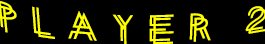
<style>
.page{position:relative;width:265px;height:44px;background:#000000}
.page>*{position:absolute;margin:0}
.t1{font:53.3px "entanglement";color:#ffff00}
</style>
<div class="page">
<p class="t1" style="left:0px;top:0px;width:267px;height:45px">PLAYER 2</p>
</div>
